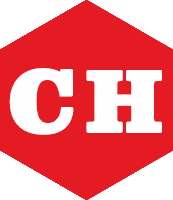
<style>
.page{position:relative;width:173px;height:200px;background:#e41b23}
.page>*{position:absolute;margin:0}
.t1{font:90px "ClarendonBT-Black";letter-spacing:0.1em;color:#fffefe;font-weight:bold}
</style>
<div class="page">
<p class="t1" style="left:9px;top:68px;width:153px;height:67px">CH</p>
</div>
